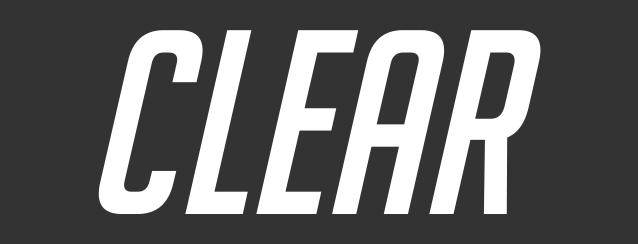
<style>
.page{position:relative;width:638px;height:244px;background:#333333}
.page>*{position:absolute;margin:0}
.t1{font:256px "BigNoodleTitling-Oblique";color:#ffffff;font-style:italic}
</style>
<div class="page">
<p class="t1" style="left:98px;top:30px;width:443px;height:184px">CLEAR</p>
</div>
